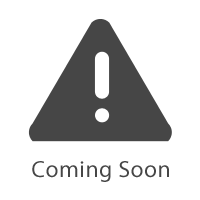
<style>
.page{position:relative;width:200px;height:200px;background:#ffffff}
.page>*{position:absolute;margin:0}
.t1{font:23.5px "MyriadPro-Regular";letter-spacing:0.025em;color:#464646}
</style>
<div class="page">
<p class="t1" style="left:32px;top:161px;width:137px;height:21px">Coming Soon</p>
</div>
